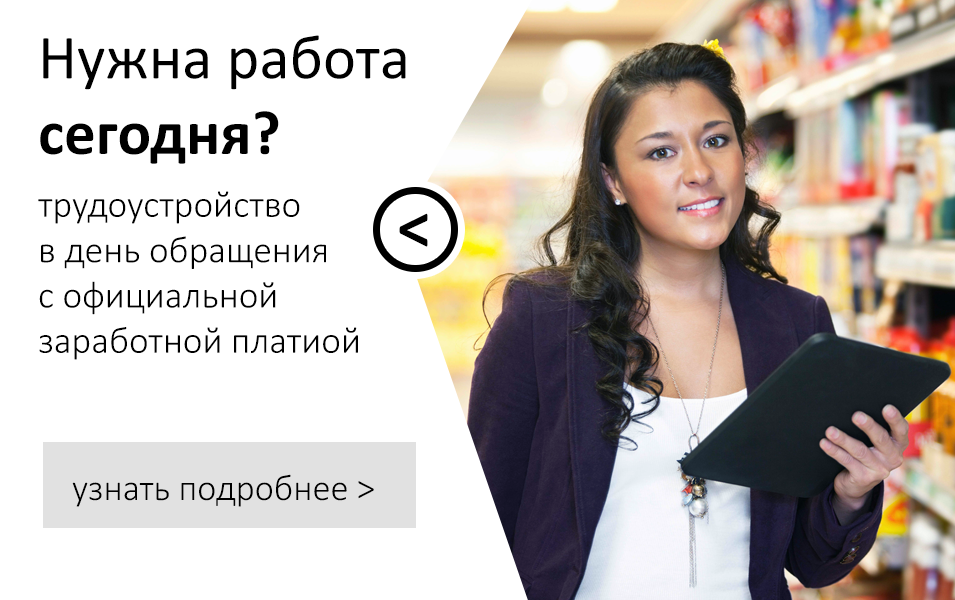
<style>
.page{position:relative;width:955px;height:600px;background:#ffffff}
.page>*{position:absolute;margin:0}
.t1{font:62.9px "Calibri";color:#000000}
.t2{font:62.9px "Calibri-Bold";color:#000000}
.t3{font:37.8px "Calibri-Light";color:#000000}
.t4{font:67.3px "Calibri-Bold";color:#000000}
.t5{font:36.9px "Calibri-Light";color:#000000}
</style>
<div class="page">
<p class="t1" style="left:40px;top:35px;width:366px;height:129px">Нужна работа<br><span class="t2">сегодня?</span></p>
<p class="t3" style="left:38px;top:191px;width:320px;height:169px">трудоустройство <br>в день обращения <br>с официальной <br>заработной платиой</p>
<p class="t4" style="left:399px;top:213px;width:29px;height:34px;rotate:180deg">&gt;</p>
<p class="t5" style="left:72px;top:474px;width:302px;height:33px">узнать подробнее &gt;</p>
</div>
